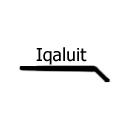
<style>
.page{position:relative;width:128px;height:128px;background:#ffffff}
.page>*{position:absolute;margin:0}
.t1{font:17.9px "Tahoma";color:#000000}
</style>
<div class="page">
<p class="t1" style="left:36px;top:47px;width:51px;height:18px">Iqaluit</p>
</div>
